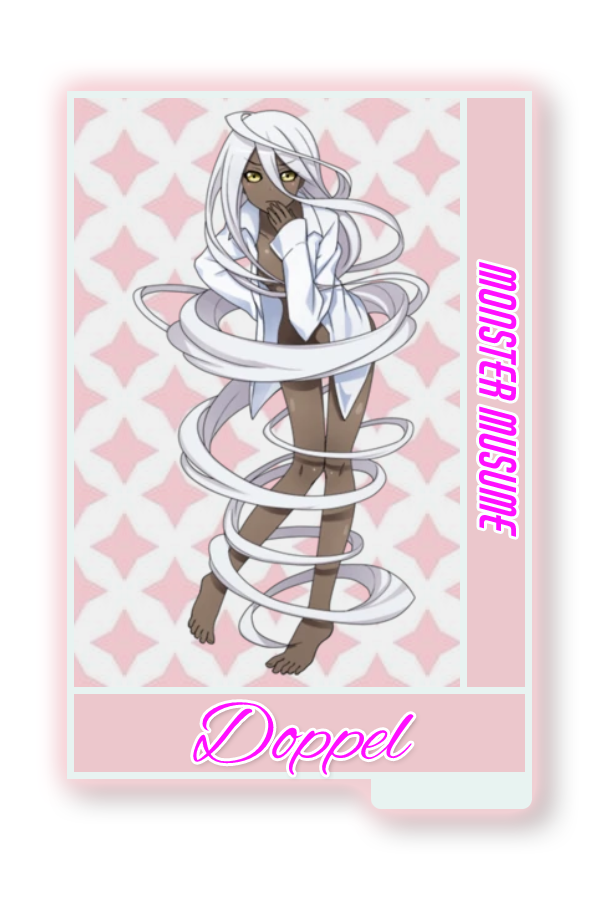
<style>
.page{position:relative;width:600px;height:900px;background:#ffffff}
.page>*{position:absolute;margin:0}
.t1{font:48.8px "AirAmerica-Regular";color:#ff0fff}
.t2{font:88px "AlexBrush-Regular";color:#ff0fff}
</style>
<div class="page">
<p class="t1" style="left:478px;top:261px;width:39px;height:276px;rotate:90deg">Monster Musume</p>
<p class="t2" style="left:193px;top:702px;width:221px;height:73px">Doppel</p>
</div>
